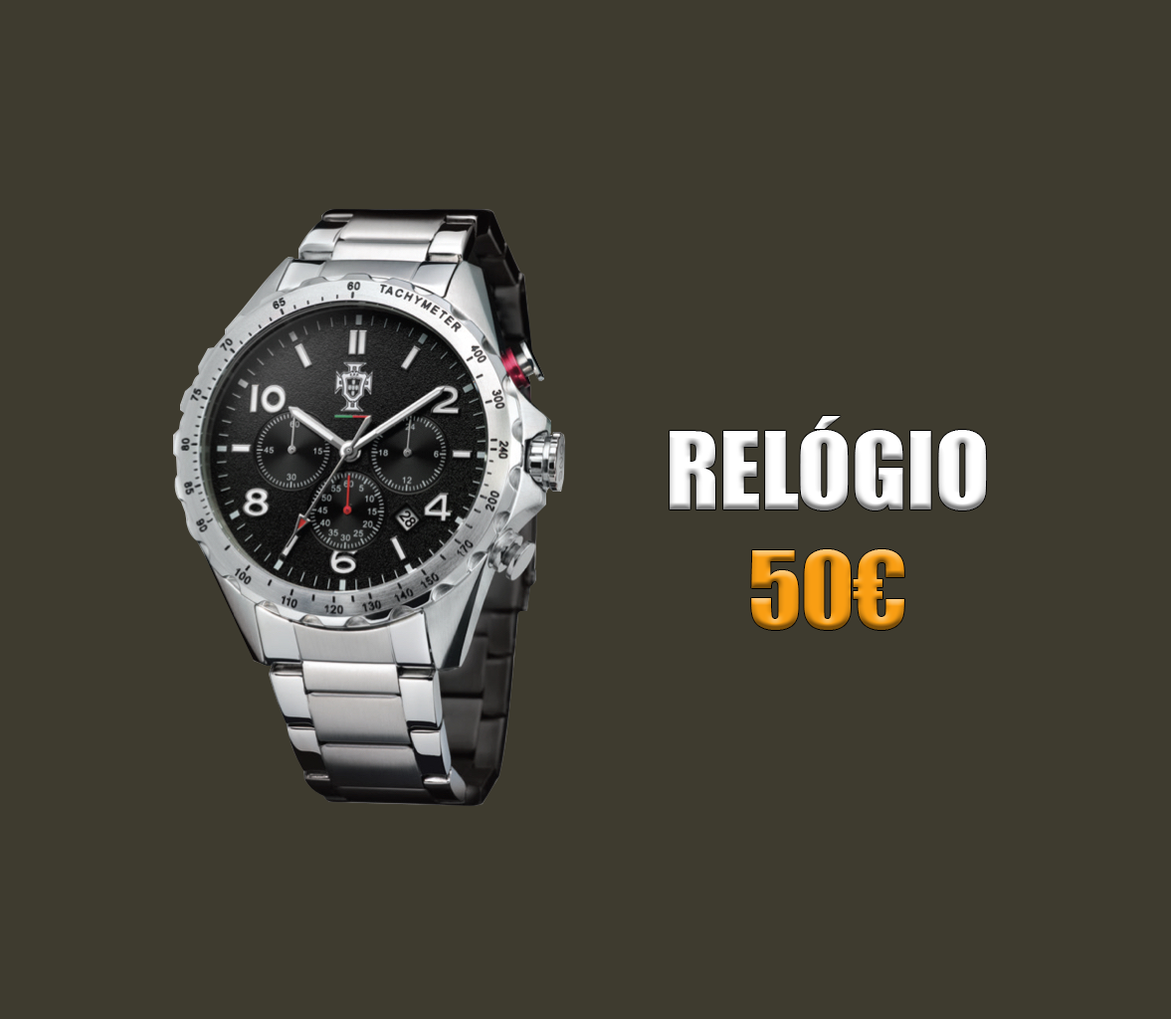
<style>
.page{position:relative;width:1171px;height:1019px;background:#3e3b2f}
.page>*{position:absolute;margin:0}
.t1{font:99.5px "Impact";color:#ffffff}
.t2{font:99.5px "Impact";color:#f99e13}
</style>
<div class="page">
<p class="t1" style="left:669px;top:416px;width:318px;height:214px;text-align:center">RELÓGIO<br><span class="t2">50€</span></p>
</div>
